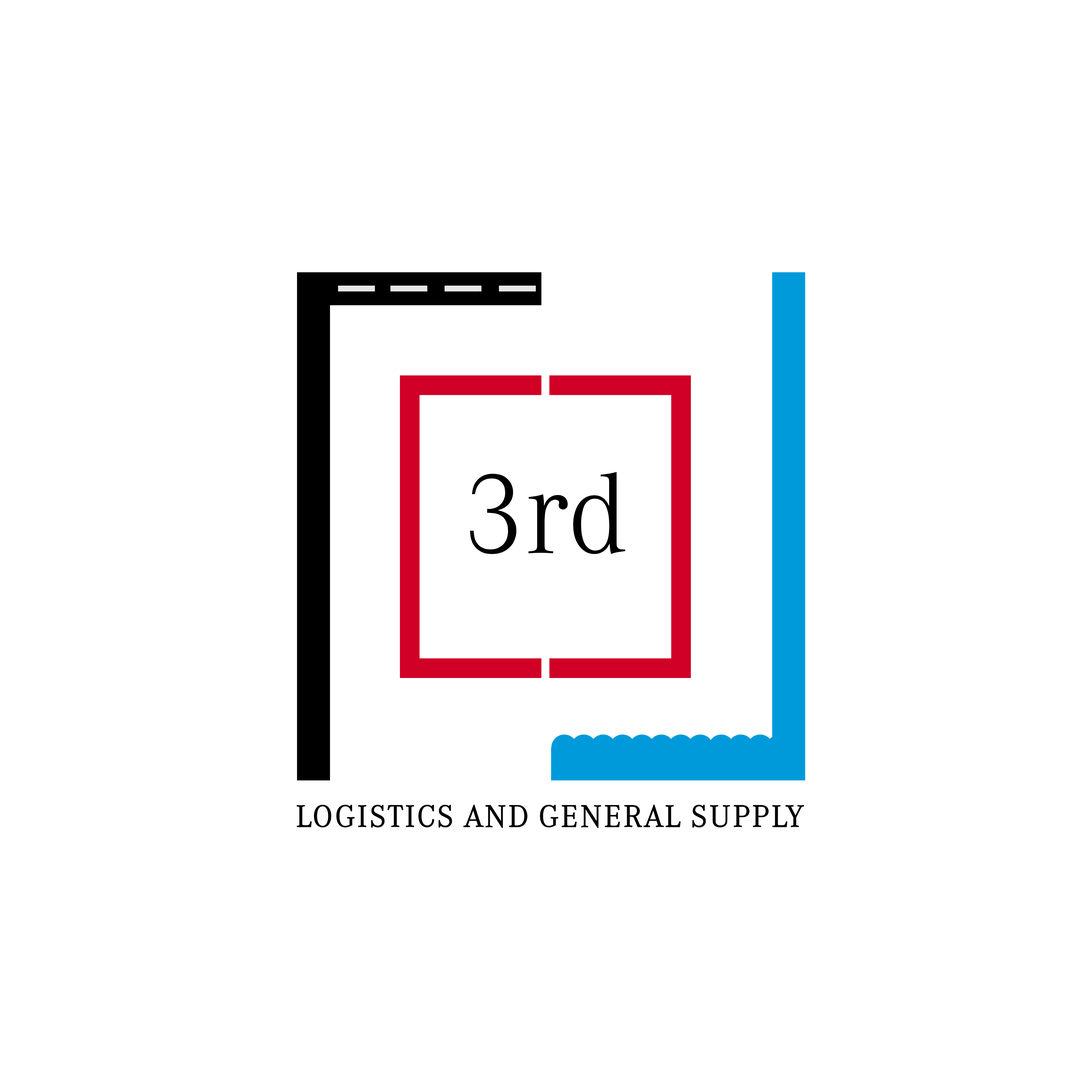
<style>
.page{position:relative;width:1092px;height:1092px;background:#ffffff}
.page>*{position:absolute;margin:0}
.t1{font:113.2px "CorporateABQ-Light";color:#000000}
.t2{font:30px "CorporateABQ-Light";letter-spacing:0.02em;color:#000000;font-weight:bold}
</style>
<div class="page">
<p class="t1" style="left:470px;top:472px;width:155px;height:82px">3rd</p>
<p class="t2" style="left:297px;top:804px;width:507px;height:24px">LOGISTICS AND GENERAL SUPPLY</p>
</div>
